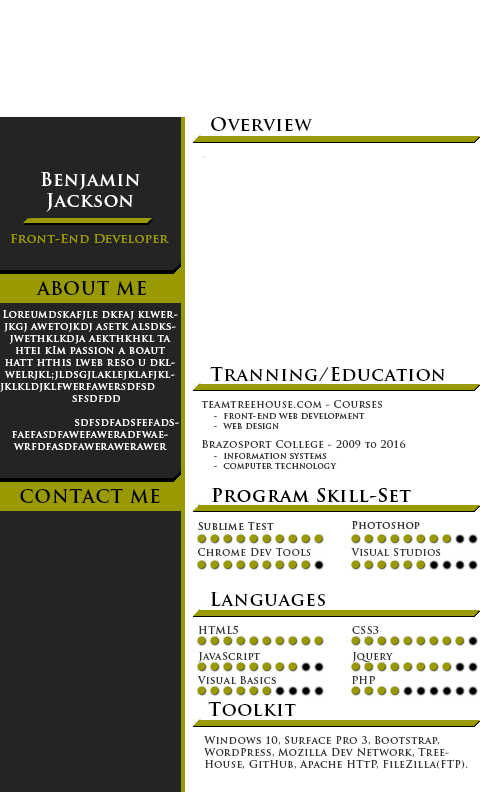
<style>
.page{position:relative;width:504px;height:792px;background:#ffffff}
.page>*{position:absolute;margin:0}
.t1{font:18px "TrajanPro-Bold";letter-spacing:0.04em;color:#000000}
.t2{font:18px "TrajanPro-Bold";letter-spacing:0.04em;color:#ffffff}
.t3{font:12px "TrajanPro-Bold";letter-spacing:0.04em;color:#999900}
.t4{font:10px "TrajanPro-Bold";letter-spacing:0.04em;color:#ffffff}
.t5{font:10px "TrajanPro-Bold";letter-spacing:0.04em;color:#333333}
.t6{font:8px "TrajanPro-Bold";letter-spacing:0.04em;color:#333333}
</style>
<div class="page">
<p class="t1" style="left:211px;top:117px;width:101px;height:14px">Overview</p>
<p class="t2" style="left:41px;top:172px;width:99px;height:40px;text-align:center">Benjamin<br>Jackson</p>
<p class="t3" style="left:10px;top:234px;width:159px;height:9px">Front-End Developer</p>
<p class="t1" style="left:36px;top:281px;width:110px;height:14px">ABOUT ME</p>
<p class="t4" style="left:0px;top:310px;width:179px;height:140px;text-align:center">Loreumdskafjle dkfaj klwerjkgj awetojkdj asetk alsdksjwethklkdja aekthkhkl ta htei kIm passion a boaut hatt hthis lweb reso u dklwelrjkl;jldsgjlaklejklafjkljklkldjklfwerfawersdfsd    sfsdfdd         sdfsdfadsfefadsfaefasdfawefaweradfwaewrfdfasdfawerawerawer</p>
<p class="t1" style="left:210px;top:367px;width:235px;height:15px">Tranning/Education</p>
<p class="t5" style="left:201px;top:400px;width:181px;height:8px">teamtreehouse.com - Courses</p>
<p class="t6" style="left:214px;top:413px;width:151px;height:6px">-  Front-End Web Development</p>
<p class="t6" style="left:214px;top:423px;width:65px;height:6px">-  Web Design</p>
<p class="t5" style="left:202px;top:440px;width:204px;height:9px">Brazosport College - 2009 <span class="t6">to</span> 2016</p>
<p class="t6" style="left:214px;top:453px;width:112px;height:6px">-  Information Systems</p>
<p class="t6" style="left:214px;top:463px;width:123px;height:6px">-  Computer Technology</p>
<p class="t1" style="left:20px;top:489px;width:140px;height:14px">CONTACT ME</p>
<p class="t5" style="left:198px;top:548px;width:113px;height:8px">Chrome Dev Tools</p>
<p class="t5" style="left:351px;top:548px;width:90px;height:8px">Visual Studios</p>
<p class="t1" style="left:211px;top:592px;width:114px;height:14px">Languages</p>
<p class="t5" style="left:198px;top:626px;width:40px;height:8px">HTML5</p>
<p class="t5" style="left:352px;top:626px;width:27px;height:8px">CSS3</p>
<p class="t5" style="left:198px;top:652px;width:62px;height:11px">JavaScript</p>
<p class="t5" style="left:352px;top:652px;width:41px;height:11px">Jquery</p>
<p class="t5" style="left:197px;top:676px;width:79px;height:8px">Visual Basics</p>
<p class="t5" style="left:352px;top:676px;width:23px;height:8px">PHP</p>
<p class="t1" style="left:208px;top:702px;width:88px;height:14px">Toolkit</p>
<p class="t5" style="left:204px;top:736px;width:264px;height:33px;text-align:right">Windows 10, Surface Pro 3, Bootstrap, WordPress, Mozilla Dev Network, TreeHouse, GitHub, Apache HTtP, FileZilla(FTP).</p>
</div>
